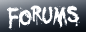
<style>
.page{position:relative;width:86px;height:32px}
.page>*{position:absolute;margin:0}
.t1{font:37.3px "YouMurdererBB";color:#ffffff;scale:0.84 1}
</style>
<div class="page">
<p class="t1" style="left:7px;top:5px;width:73px;height:25px">Forums</p>
</div>
